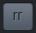
<style>
.page{position:relative;width:36px;height:33px;background:#22252a}
.page>*{position:absolute;margin:0}
.t1{font:14px "ArialMT";color:#2c353f}
</style>
<div class="page">
<p class="t1" style="left:13px;top:12px;width:10px;height:8px">rr</p>
</div>
